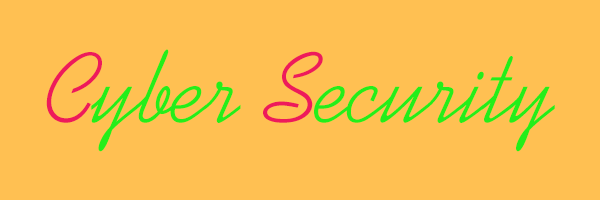
<style>
.page{position:relative;width:600px;height:200px;background:#ffc052}
.page>*{position:absolute;margin:0}
.t1{font:100px "KaufmannBT-Regular";color:#24ee1a}
.t2{font:100px "KaufmannBT-Regular";color:#ee1a5b}
</style>
<div class="page">
<p class="t1" style="left:46px;top:49px;width:509px;height:103px"><span class="t2">C</span>yber <span class="t2">S</span>ecurity</p>
</div>
